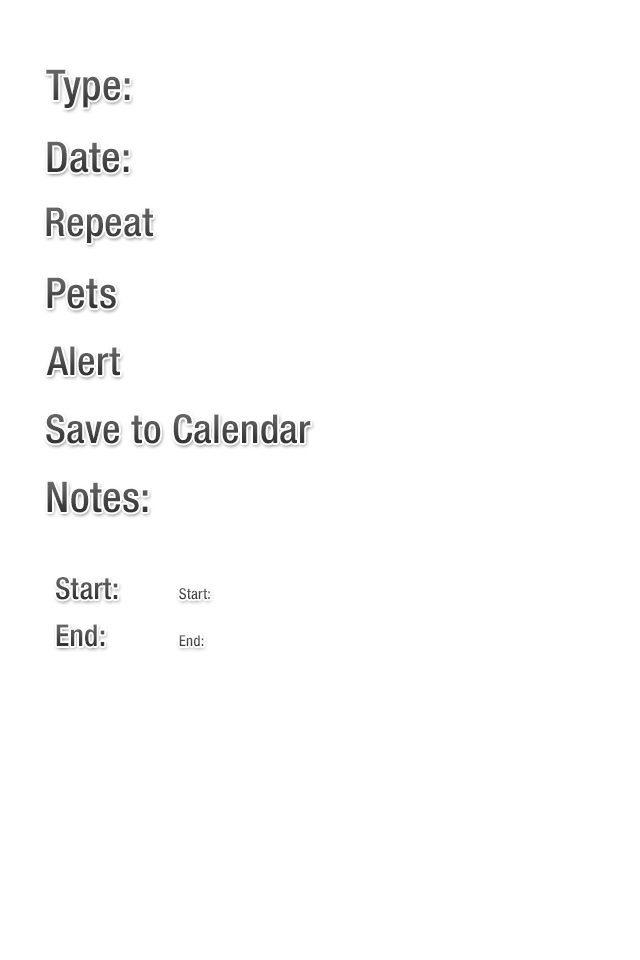
<style>
.page{position:relative;width:640px;height:960px;background:#ffffff}
.page>*{position:absolute;margin:0}
.t1{font:42.5px "HelveticaNeueLTStd-MdCn";letter-spacing:0.01em;color:#505050}
.t2{font:42.5px "HelveticaNeueLTStd-MdCn";letter-spacing:0.01em;color:#484848}
.t3{font:40px "HelveticaNeueLTStd-MdCn";letter-spacing:0.01em;color:#4f4f4f}
.t4{font:42.5px "HelveticaNeueLTStd-MdCn";letter-spacing:0.01em;color:#4d4d4d}
.t5{font:40px "HelveticaNeueLTStd-MdCn";letter-spacing:0.01em;color:#4a4a4a}
.t6{font:40px "HelveticaNeueLTStd-MdCn";letter-spacing:0.01em;color:#474747}
.t7{font:30px "HelveticaNeueLTStd-MdCn";letter-spacing:0.01em;color:#4a4a4a}
.t8{font:15px "HelveticaNeueLTStd-MdCn";letter-spacing:0.01em;color:#4f4f4f}
.t9{font:30px "HelveticaNeueLTStd-MdCn";letter-spacing:0.01em;color:#4b4b4b}
.t10{font:15px "HelveticaNeueLTStd-MdCn";letter-spacing:0.01em;color:#4a4a4a}
</style>
<div class="page">
<p class="t1" style="left:46px;top:69px;width:84px;height:39px">Type:</p>
<p class="t2" style="left:47px;top:141px;width:82px;height:32px">Date:</p>
<p class="t3" style="left:46px;top:207px;width:107px;height:36px">Repeat</p>
<p class="t4" style="left:47px;top:277px;width:69px;height:32px">Pets</p>
<p class="t5" style="left:46px;top:346px;width:74px;height:30px">Alert</p>
<p class="t6" style="left:46px;top:414px;width:265px;height:30px">Save to Calendar</p>
<p class="t2" style="left:47px;top:481px;width:101px;height:32px">Notes:</p>
<p class="t7" style="left:56px;top:577px;width:62px;height:23px">Start:</p>
<p class="t8" style="left:179px;top:588px;width:31px;height:12px">Start:</p>
<p class="t9" style="left:56px;top:624px;width:49px;height:23px">End:</p>
<p class="t10" style="left:179px;top:635px;width:25px;height:12px">End:</p>
</div>
